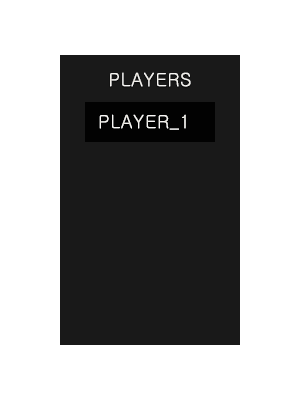
<style>
.page{position:relative;width:300px;height:400px;background:#ffffff}
.page>*{position:absolute;margin:0}
.t1{font:18px "Gulim";letter-spacing:0.04em;color:#f6f5f1;text-transform:uppercase}
.t2{font:18px "Gulim";letter-spacing:0.04em;color:#f8f7f4;text-transform:uppercase}
</style>
<div class="page">
<p class="t1" style="left:110px;top:72px;width:81px;height:15px">PLAYERS</p>
<p class="t2" style="left:99px;top:114px;width:87px;height:16px">PLAYER_1</p>
</div>
